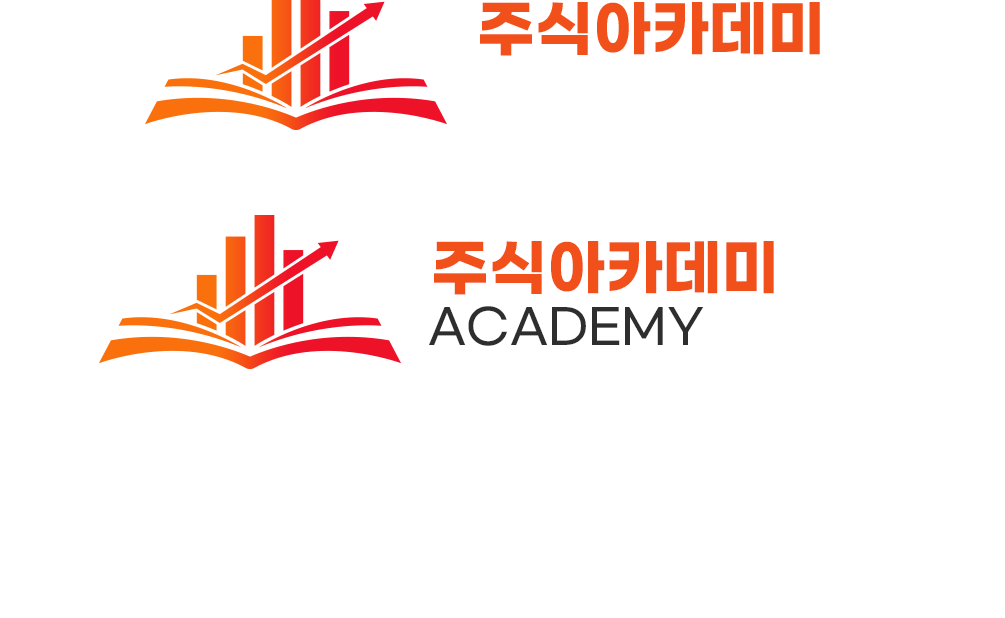
<style>
.page{position:relative;width:1005px;height:618px;background:#ffffff}
.page>*{position:absolute;margin:0}
.t1{font:45.9px "GmarketSansTTFBold";color:#f1501b}
.t2{font:35.4px "GmarketSansTTFMedium";color:#2e2e2e}
</style>
<div class="page">
<p class="t1" style="left:434px;top:241px;width:340px;height:54px">주식아카데미</p>
<p class="t2" style="left:429px;top:306px;width:275px;height:40px">ACADEMY</p>
</div>
